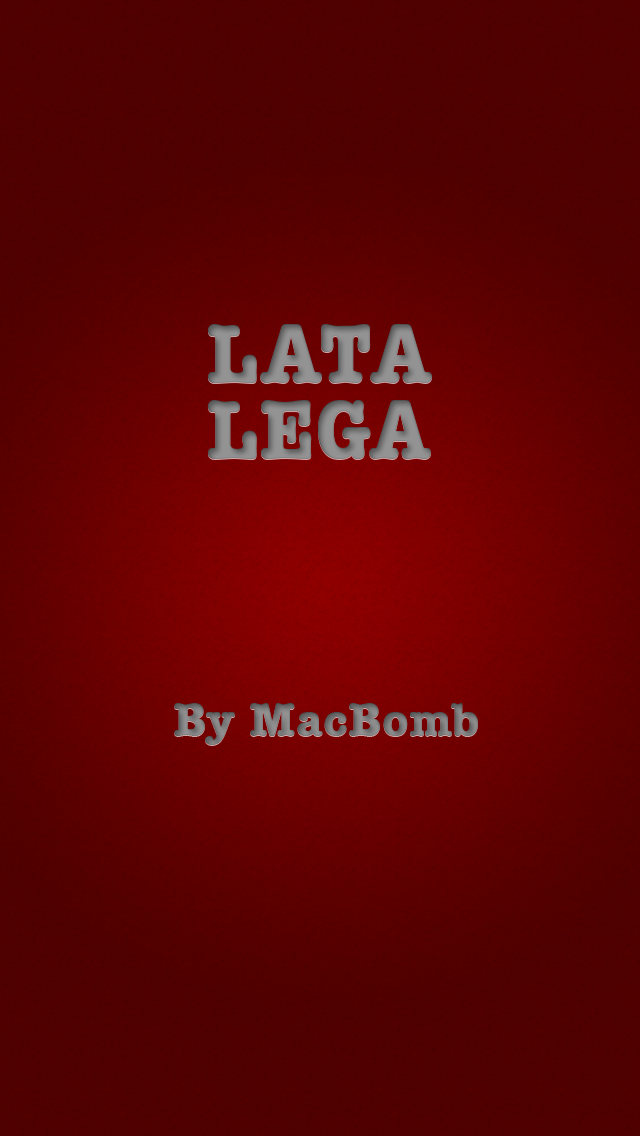
<style>
.page{position:relative;width:640px;height:1136px}
.page>*{position:absolute;margin:0}
.t1{font:84.7px/76px "AmericanTypewriter-CondensedBold";color:#939393;scale:1.18 1}
.t2{font:46.2px "AmericanTypewriter-CondensedBold";color:#7c7c7d;scale:1.3 1}
</style>
<div class="page">
<p class="t1" style="left:207px;top:324px;width:225px;height:135px;text-align:center">LATA<br>LEGA</p>
<p class="t2" style="left:174px;top:703px;width:304px;height:42px">By MacBomb</p>
</div>
